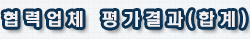
<style>
.page{position:relative;width:250px;height:39px;background:#f3f6f8}
.page>*{position:absolute;margin:0}
.t1{font:18px "ÇÑ¾ç°¡´ÂÇìµå¶óÀÎ";letter-spacing:0.2em;color:#f4f0f2}
</style>
<div class="page">
<p class="t1" style="left:3px;top:10px;width:243px;height:18px">협력업체 평가결과(합계)</p>
</div>
